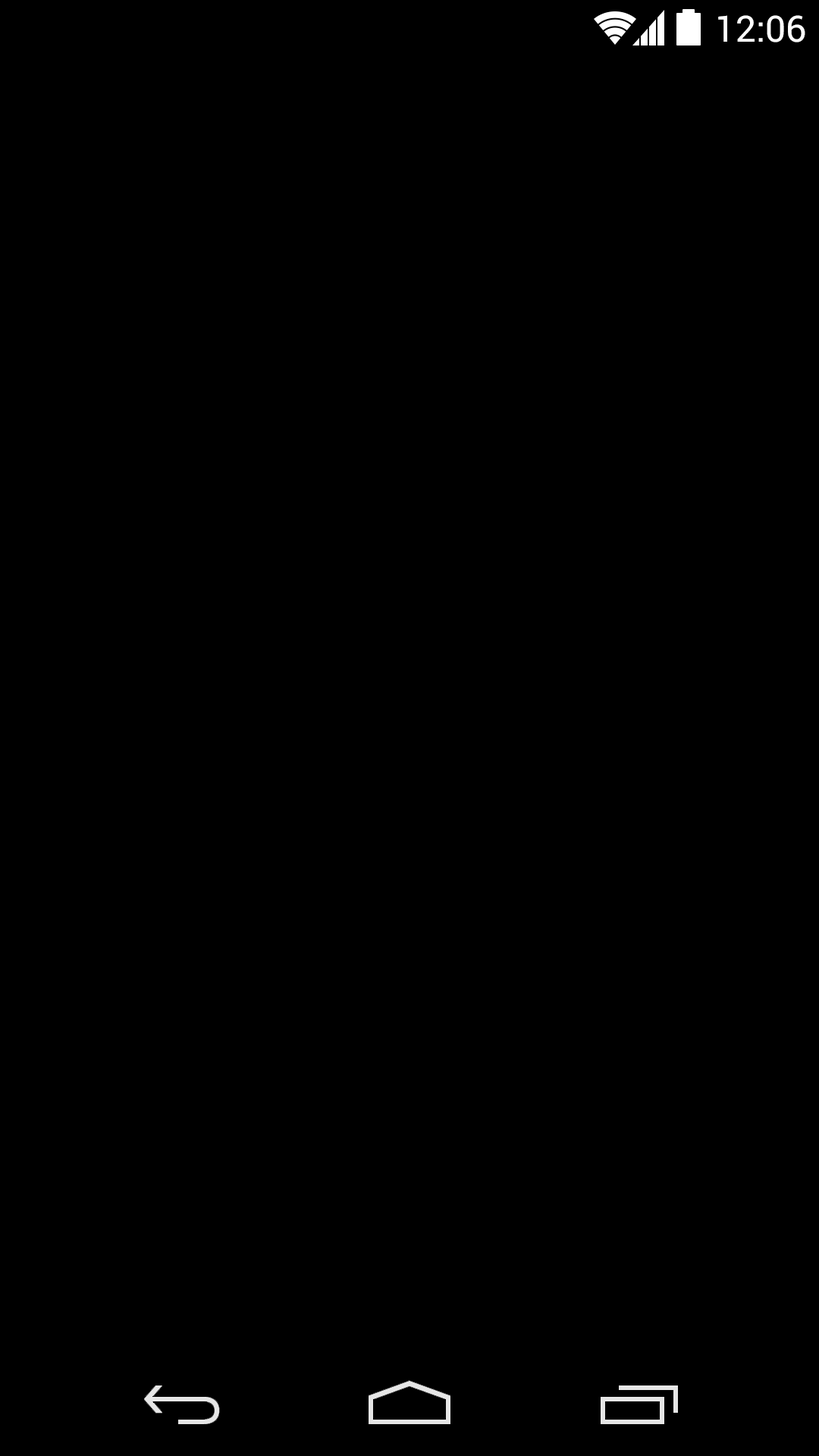
<style>
.page{position:relative;width:819px;height:1456px;background:#000000}
.page>*{position:absolute;margin:0}
.t1{font:36.4px "Roboto-Regular";color:#ffffff}
</style>
<div class="page">
<p class="t1" style="left:718px;top:15px;width:87px;height:27px">12:06</p>
</div>
